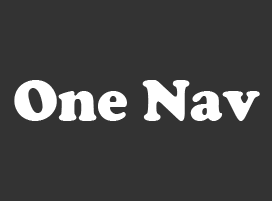
<style>
.page{position:relative;width:272px;height:201px;background:#333333}
.page>*{position:absolute;margin:0}
.t1{font:58px "CooperBlack";color:#ffffff}
</style>
<div class="page">
<p class="t1" style="left:14px;top:80px;width:246px;height:41px">One Nav</p>
</div>
